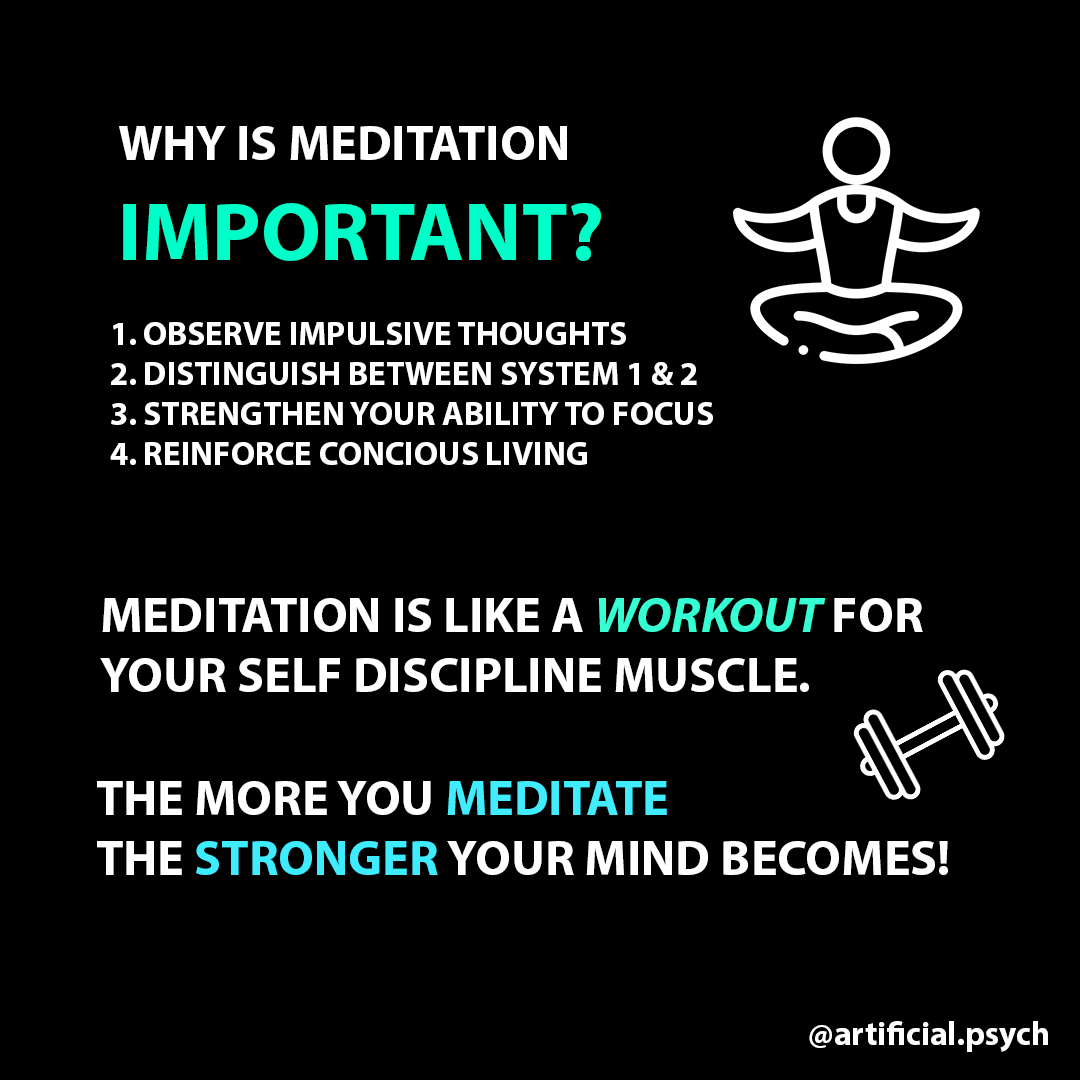
<style>
.page{position:relative;width:1080px;height:1080px;background:#000000}
.page>*{position:absolute;margin:0}
.t1{font:50px "MyriadPro-Bold";color:#ffffff}
.t2{font:83.3px "MyriadPro-Bold";color:#00ffc8}
.t3{font:33.3px "MyriadPro-Bold";color:#ffffff}
.t4{font:50px "MyriadPro-BoldIt";color:#35ffd3}
.t5{font:50px "MyriadPro-Bold";color:#41ecff}
.t6{font:50px "MyriadPro-Bold";color:#3fecff}
</style>
<div class="page">
<p class="t1" style="left:119px;top:126px;width:482px;height:135px">WHY IS MEDITATION<br><span class="t2">IMPORTANT?</span></p>
<p class="t3" style="left:110px;top:322px;width:603px;height:143px">1. OBSERVE IMPULSIVE THOUGHTS<br>2. DISTINGUISH BETWEEN SYSTEM 1 &amp; 2<br>3. STRENGTHEN YOUR ABILITY TO FOCUS <br>4. REINFORCE CONCIOUS LIVING</p>
<p class="t1" style="left:100px;top:598px;width:823px;height:94px">MEDITATION IS LIKE A <span class="t4">WORKOUT </span>FOR <br>YOUR SELF DISCIPLINE MUSCLE.</p>
<p class="t1" style="left:97px;top:781px;width:851px;height:94px">THE MORE YOU <span class="t5">MEDITATE</span><br>THE <span class="t6">STRONGER </span>YOUR MIND BECOMES!</p>
<p class="t3" style="left:809px;top:1021px;width:239px;height:31px">@artificial.psych</p>
</div>
